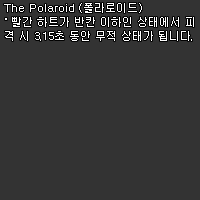
<style>
.page{position:relative;width:200px;height:200px;background:#333333}
.page>*{position:absolute;margin:0}
.t1{font:11px/14px "Dotum";color:#ffffff}
</style>
<div class="page">
<p class="t1" style="left:4px;top:3px;width:190px;height:38px">The Polaroid (폴라로이드)<br>˚ 빨간 하트가 반칸 이하인 상태에서 피<br>격 시 3.15초 동안 무적 상태가 됩니다.</p>
</div>
